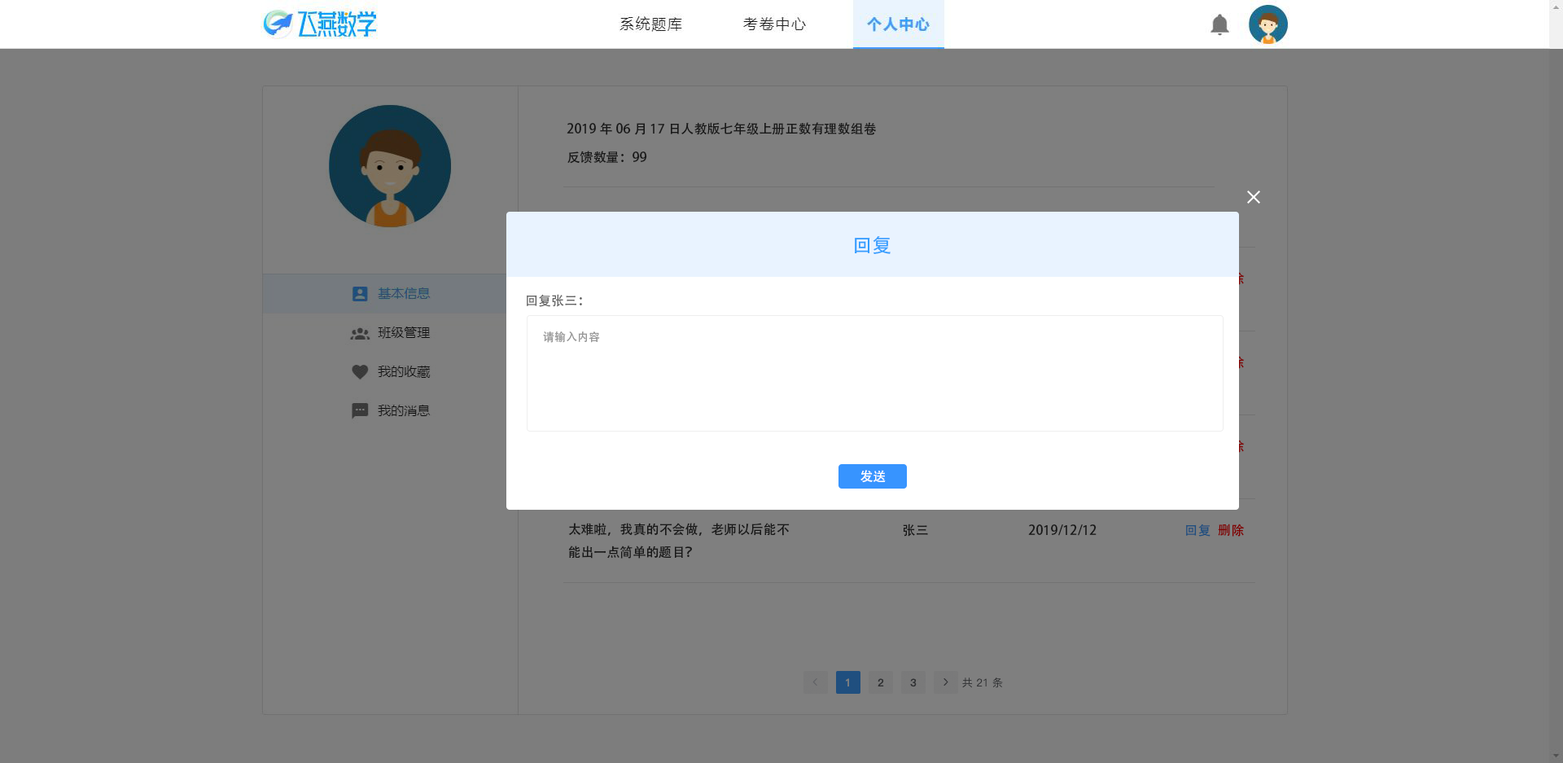
<style>
.page{position:relative;width:1563px;height:763px;background:#7d7d7d}
.page>*{position:absolute;margin:0}
.t1{font:13px "AdobeHeitiStd-Regular";color:#191919}
.t2{font:19.5px "AdobeHeitiStd-Regular";color:#339dff}
.t3{font:13px "AdobeHeitiStd-Regular";color:#666666}
.t4{font:11.4px "AdobeHeitiStd-Regular";color:#999999}
.t5{font:13px "AdobeHeitiStd-Regular";color:#ffffff}
.t6{font:13px "AdobeHeitiStd-Regular";color:#204f7f}
.t7{font:13px "AdobeHeitiStd-Regular";color:#7f0000}
</style>
<div class="page">
<p class="t1" style="left:567px;top:122px;width:309px;height:13px">2019年06月17日人教版七年级上册正数有理数组卷</p>
<p class="t1" style="left:567px;top:151px;width:80px;height:13px">反馈数量：99</p>
<p class="t2" style="left:855px;top:236px;width:36px;height:18px">回复</p>
<p class="t3" style="left:527px;top:294px;width:55px;height:13px">回复张三：</p>
<p class="t4" style="left:543px;top:331px;width:57px;height:12px">请输入内容</p>
<p class="t5" style="left:861px;top:470px;width:25px;height:13px">发送</p>
<p class="t1" style="left:568px;top:523px;width:222px;height:35px">太难啦，我真的不会做，老师以后能不能出一点简单的题目？</p>
<p class="t1" style="left:903px;top:523px;width:25px;height:14px">张三</p>
<p class="t1" style="left:1028px;top:524px;width:69px;height:12px">2019/12/12</p>
<p class="t6" style="left:1186px;top:523px;width:25px;height:14px">回复</p>
<p class="t7" style="left:1218px;top:523px;width:27px;height:14px">删除</p>
</div>
